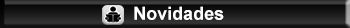
<style>
.page{position:relative;width:350px;height:28px}
.page>*{position:absolute;margin:0}
.t1{font:18px "Arial-BoldMT";color:#ffffff}
</style>
<div class="page">
<p class="t1" style="left:134px;top:6px;width:90px;height:14px">Novidades</p>
</div>
